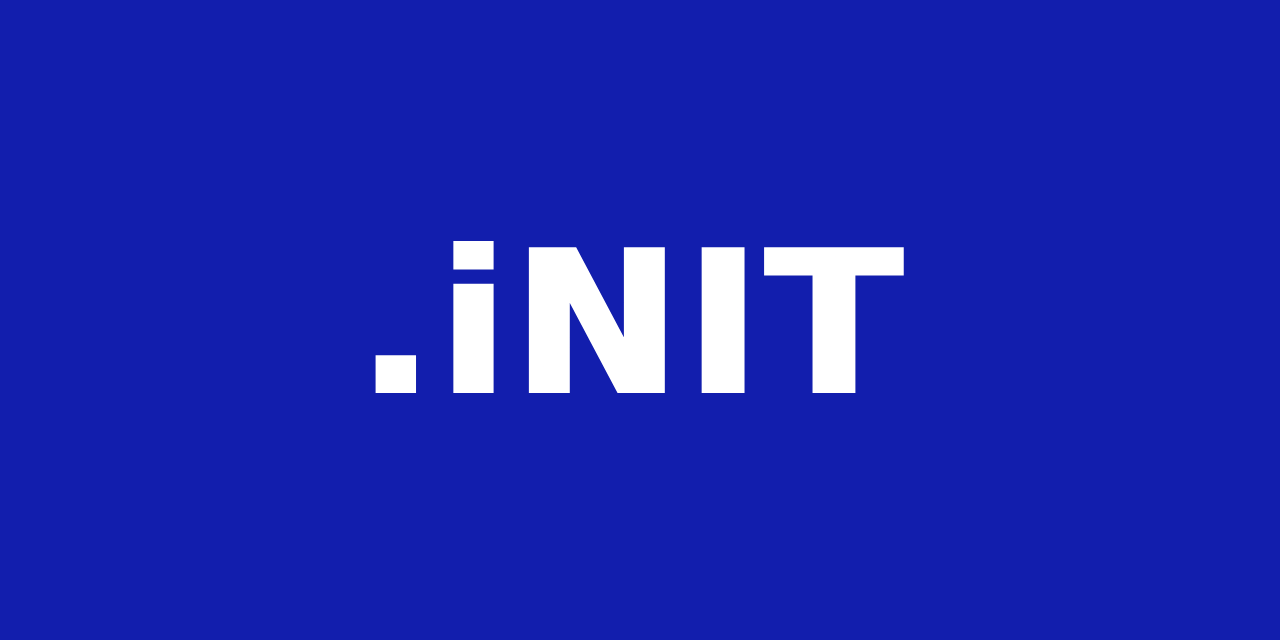
<style>
.page{position:relative;width:1280px;height:640px;background:#121ead}
.page>*{position:absolute;margin:0}
.t1{font:200px "ProximaNova-Bold";color:#ffffff;font-weight:bold}
</style>
<div class="page">
<p class="t1" style="left:375px;top:241px;width:529px;height:152px">.iNIT</p>
</div>
